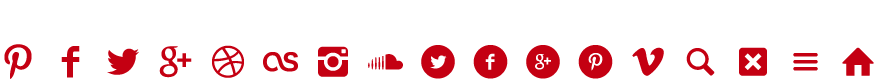
<style>
.page{position:relative;width:878px;height:83px;background:#ffffff}
.page>*{position:absolute;margin:0}
.t1{font:35px "lynx";color:#c40012}
</style>
<div class="page">
<p class="t1" style="left:4px;top:44px;width:870px;height:35px">p f t g d l i s T F G P v S X L H</p>
</div>
